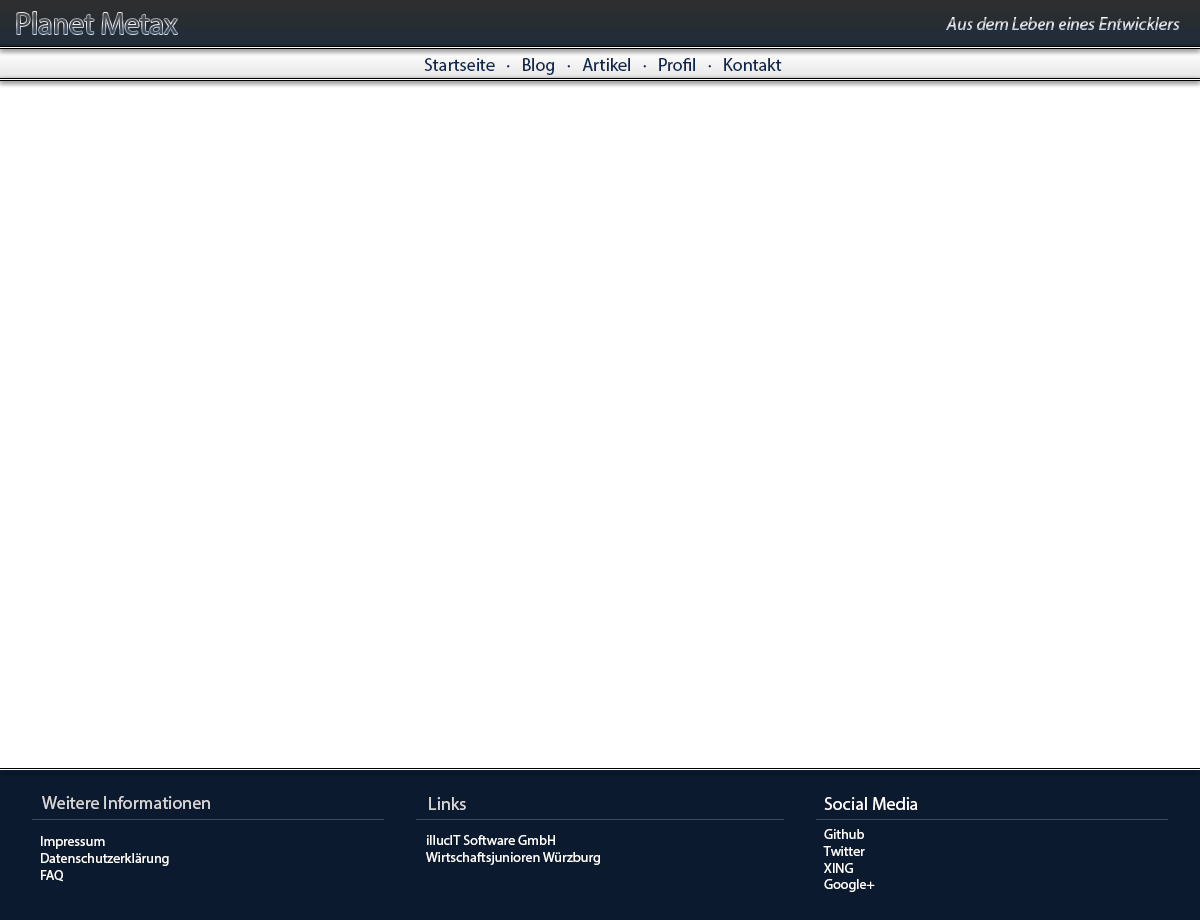
<style>
.page{position:relative;width:1200px;height:920px;background:#ffffff}
.page>*{position:absolute;margin:0}
.t1{font:18px "MyriadPro-It"}
.t2{font:18px "MyriadPro-Regular";color:#0d2750}
.t3{font:18px "MyriadPro-Regular";color:#d7d7d7}
.t4{font:18px "MyriadPro-Regular";color:#ffffff}
.t5{font:14px "MyriadPro-Regular";color:#ffffff}
</style>
<div class="page">
<p class="t1" style="left:946px;top:17px;width:234px;height:13px">Aus dem Leben eines Entwicklers</p>
<p class="t2" style="left:424px;top:58px;width:358px;height:17px">Startseite   ·   Blog   ·   Artikel   ·   Profil   ·   Kontakt</p>
<p class="t3" style="left:42px;top:796px;width:168px;height:13px">Weitere Informationen</p>
<p class="t3" style="left:429px;top:797px;width:37px;height:13px">Links</p>
<p class="t4" style="left:824px;top:797px;width:94px;height:13px">Social Media</p>
<p class="t5" style="left:823px;top:829px;width:52px;height:63px">Github<br>Twitter<br>XING<br>Google+</p>
<p class="t5" style="left:41px;top:836px;width:128px;height:46px">Impressum<br>Datenschutzerklärung<br>FAQ</p>
<p class="t5" style="left:426px;top:835px;width:174px;height:30px">illucIT Software GmbH<br>Wirtschaftsjunioren Würzburg</p>
</div>
